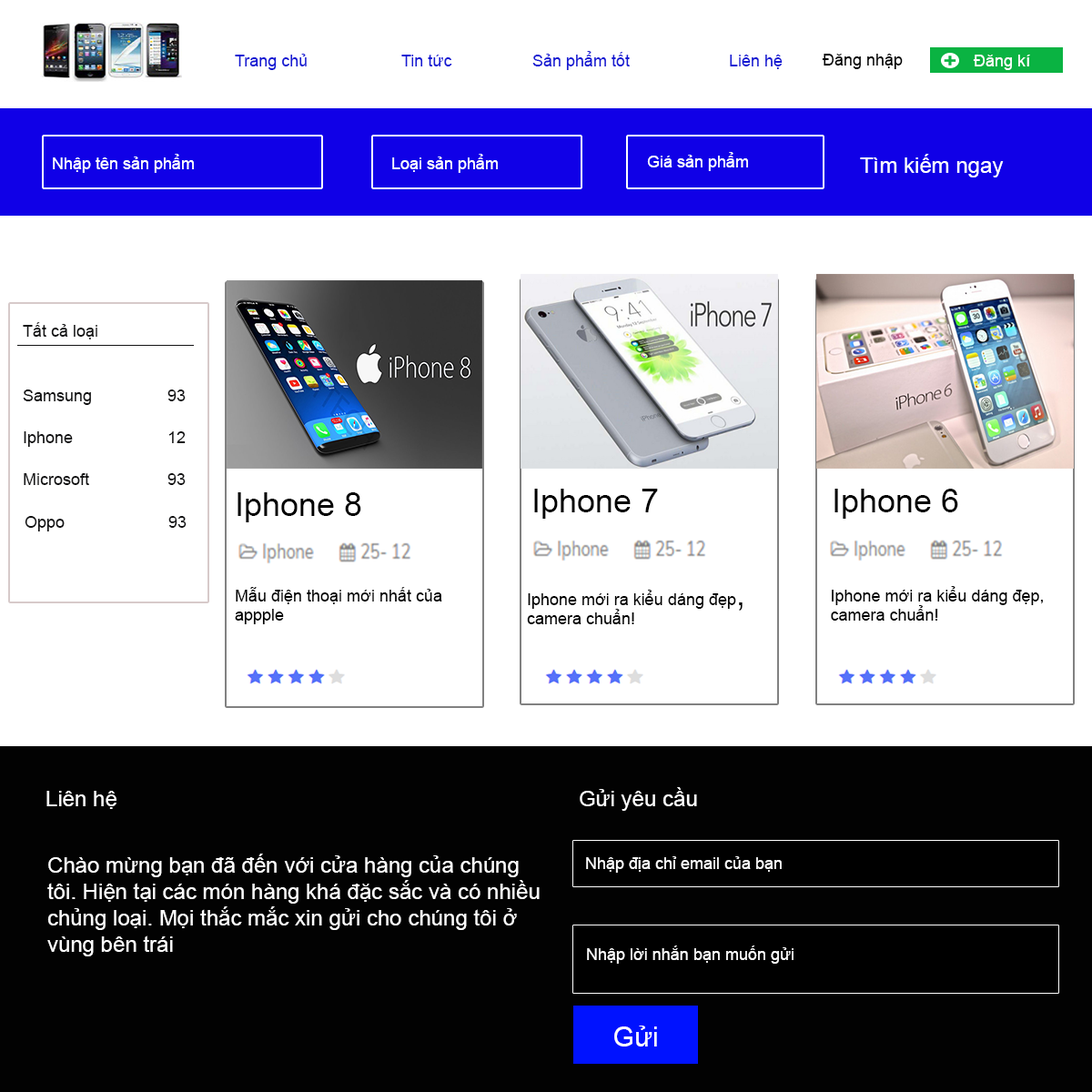
<style>
.page{position:relative;width:1092px;height:1092px;background:#ffffff}
.page>*{position:absolute;margin:0}
.t1{font:16.4px "ArialMT";color:#1519d3}
.t2{font:16.4px "ArialMT";color:#000000}
.t3{font:16.4px "ArialMT";color:#ffffff}
.t4{font:21.8px "ArialMT";color:#ffffff}
.t5{font:16.4px "ArialMT";color:#141415}
.t6{font:32.8px "ArialMT";color:#000000}
.t7{font:21.8px "ArialMT";color:#fdfdfd}
.t8{font:16.4px "ArialMT";color:#fdfdfd}
.t9{font:27.3px "ArialMT";color:#fdfdfd}
</style>
<div class="page">
<p class="t1" style="left:235px;top:54px;width:72px;height:16px">Trang chủ</p>
<p class="t1" style="left:401px;top:51px;width:382px;height:19px">Tin tức   Sản phẩm tốt    Liên hệ</p>
<p class="t2" style="left:822px;top:54px;width:81px;height:15px">Đăng nhập</p>
<p class="t3" style="left:973px;top:55px;width:57px;height:15px">Đăng kí</p>
<p class="t3" style="left:53px;top:154px;width:141px;height:19px">Nhập tên sản phẩm</p>
<p class="t3" style="left:392px;top:154px;width:106px;height:19px">Loại sản phẩm</p>
<p class="t3" style="left:647px;top:152px;width:101px;height:19px">Giá sản phẩm</p>
<p class="t4" style="left:860px;top:154px;width:144px;height:23px">Tìm kiếm ngay</p>
<p class="t5" style="left:23px;top:322px;width:74px;height:17px">Tất cả loại</p>
<p class="t5" style="left:23px;top:389px;width:163px;height:16px">Samsung     93</p>
<p class="t5" style="left:24px;top:431px;width:162px;height:16px">Iphone         12</p>
<p class="t5" style="left:24px;top:473px;width:162px;height:12px">Microsoft     93</p>
<p class="t6" style="left:238px;top:492px;width:123px;height:30px">Iphone 8</p>
<p class="t6" style="left:534px;top:489px;width:124px;height:30px">Iphone 7</p>
<p class="t6" style="left:834px;top:489px;width:124px;height:30px">Iphone 6</p>
<p class="t5" style="left:25px;top:516px;width:162px;height:15px">Oppo              93</p>
<p class="t2" style="left:235px;top:587px;width:207px;height:37px">Mẫu điện thoại mới nhất của appple</p>
<p class="t2" style="left:527px;top:590px;width:216px;height:34px">Iphone mới ra kiểu dáng đẹp<span class="t6">, </span>camera chuẩn!</p>
<p class="t2" style="left:831px;top:586px;width:212px;height:35px">Iphone mới ra kiểu dáng đẹp, camera chuẩn!</p>
<p class="t7" style="left:46px;top:791px;width:70px;height:18px">Liên hệ</p>
<p class="t7" style="left:580px;top:787px;width:117px;height:24px">Gửi yêu cầu</p>
<p class="t7" style="left:47px;top:854px;width:493px;height:102px">Chào mừng bạn đã đến với cửa hàng của chúng tôi. Hiện tại các món hàng khá đặc sắc và có nhiều chủng loại. Mọi thắc mắc xin gửi cho chúng tôi ở vùng bên trái</p>
<p class="t8" style="left:586px;top:856px;width:196px;height:17px">Nhập địa chỉ email của bạn</p>
<p class="t8" style="left:587px;top:945px;width:207px;height:19px">Nhập lời nhắn bạn muốn gửi</p>
<p class="t9" style="left:614px;top:1026px;width:43px;height:20px">Gửi</p>
</div>
